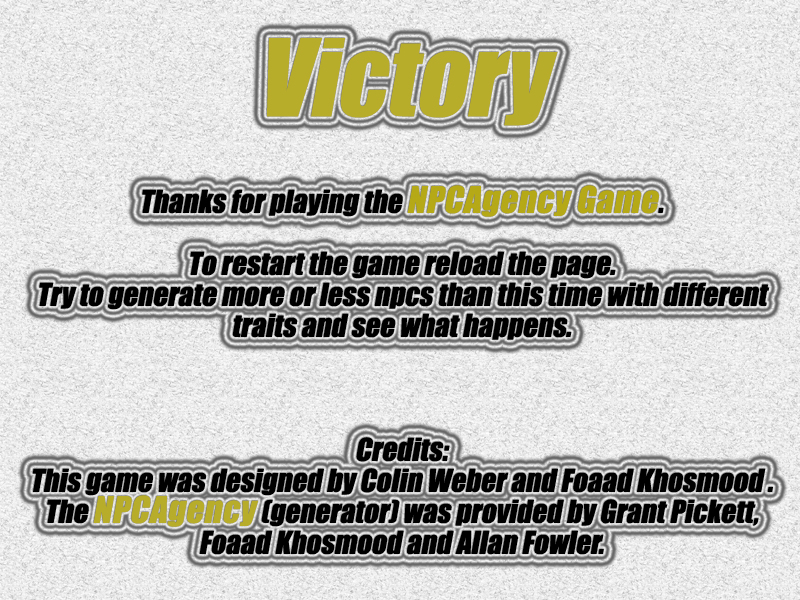
<style>
.page{position:relative;width:800px;height:600px}
.page>*{position:absolute;margin:0}
.t1{font:99px "Impact";color:#b8ad2b;font-style:italic}
.t2{font:29px/31px "Impact";color:#000000;font-style:italic}
.t3{font:34px/31px "Impact";letter-spacing:0.02em;color:#b5a917;font-style:italic}
.t4{font:34px/31px "Impact";letter-spacing:0.02em;color:#b8ad2b;font-style:italic}
</style>
<div class="page">
<p class="t1" style="left:267px;top:38px;width:291px;height:88px">Victory</p>
<p class="t2" style="left:32px;top:185px;width:741px;height:370px;text-align:center">Thanks for playing the <span class="t3">NPCAgency Game</span>.<br><br>To restart the game reload the page. <br>Try to generate more or less npcs than this time with different traits and see what happens.<br><br><br><br>Credits:<br>This game was designed by Colin Weber and Foaad Khosmood .<br>The <span class="t4">NPCAgency </span>(generator) was provided by Grant Pickett, Foaad Khosmood and Allan Fowler.</p>
</div>
